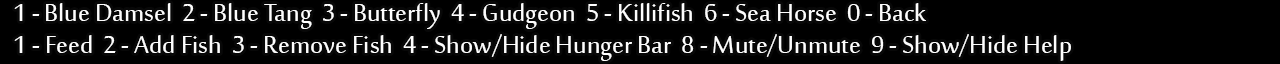
<style>
.page{position:relative;width:1280px;height:64px;background:#000000}
.page>*{position:absolute;margin:0}
.t1{font:33px "SakkalMajalla";color:#fefefe}
</style>
<div class="page">
<p class="t1" style="left:14px;top:3px;width:912px;height:26px">1 - Blue Damsel  2 - Blue Tang  3 - Butterfly  4 - Gudgeon  5 - Killifish  6 - Sea Horse  0 - Back</p>
<p class="t1" style="left:14px;top:34px;width:1057px;height:27px">1 - Feed  2 - Add Fish  3 - Remove Fish  4 - Show/Hide Hunger Bar  8 - Mute/Unmute  9 - Show/Hide Help</p>
</div>
